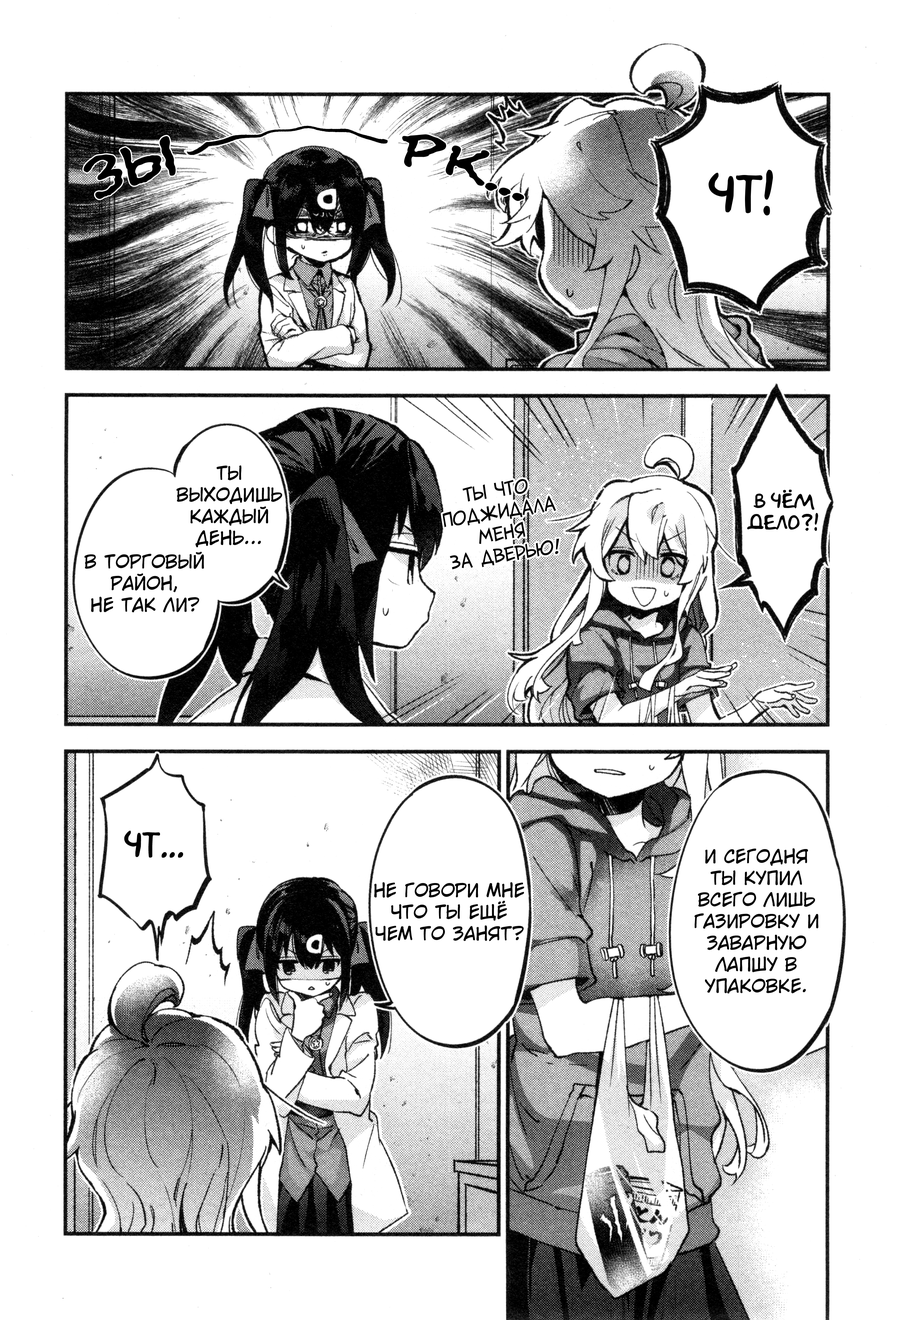
<style>
.page{position:relative;width:904px;height:1320px;background:#ffffff}
.page>*{position:absolute;margin:0}
.t1{font:56.6px "el_CCEvilSchemes";color:#000000;text-transform:uppercase}
.t2{font:46.3px "AkbarPlain";color:#000000;text-transform:uppercase}
.t3{font:18px "v_CCWildWordsLower";color:#000000;text-transform:uppercase}
.t4{font:18px "d_CCWallScrawler";color:#000000;text-transform:uppercase}
.t5{font:18px "AkbarPlain";color:#000000;text-transform:uppercase}
.t6{font:30.9px "AkbarPlain";color:#000000;text-transform:uppercase}
</style>
<div class="page">
<p class="t1" style="left:83px;top:134px;width:441px;height:67px">Зы          рк...</p>
<p class="t2" style="left:708px;top:170px;width:65px;height:45px">Чт!</p>
<p class="t3" style="left:176px;top:465px;width:106px;height:82px;text-align:center">Ты выходишь каждый день...</p>
<p class="t4" style="left:442px;top:479px;width:117px;height:90px;text-align:center;rotate:-9deg">Ты что поджидала меня <br>за дверью!</p>
<p class="t5" style="left:747px;top:489px;width:71px;height:42px;text-align:center">В чём дело?!</p>
<p class="t3" style="left:84px;top:551px;width:120px;height:61px;text-align:center">в торговый район,<br>не так ли?</p>
<p class="t6" style="left:124px;top:830px;width:59px;height:28px">Чт...</p>
<p class="t3" style="left:694px;top:848px;width:124px;height:145px;text-align:center">И сегодня <br>ты купил<br>всего лишь газировку и заварную <br>лапшу в упаковке.</p>
<p class="t3" style="left:374px;top:882px;width:150px;height:59px;text-align:center">Не говори мне что ты ещё чем то занят?</p>
</div>
